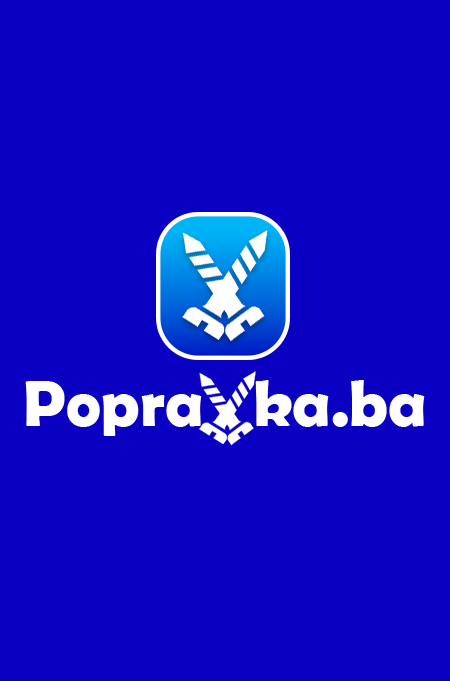
<style>
.page{position:relative;width:450px;height:681px;background:#0900c2}
.page>*{position:absolute;margin:0}
.t1{font:65.6px "BerlinSansFBDemi-Bold";color:#ffffff}
</style>
<div class="page">
<p class="t1" style="left:25px;top:380px;width:400px;height:56px">Popra   ka.ba</p>
</div>
